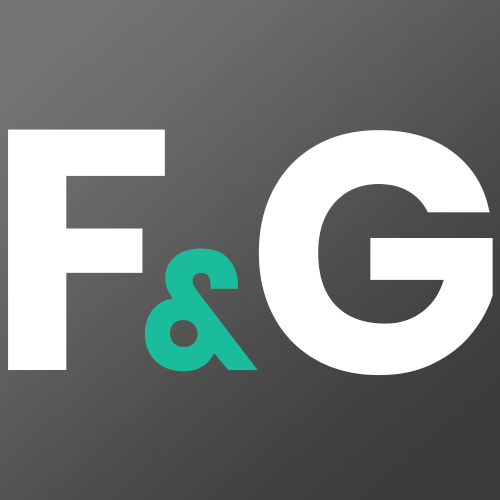
<style>
.page{position:relative;width:500px;height:500px;background:#ffffff}
.page>*{position:absolute;margin:0}
.t1{font:340px "Poppins-Bold";color:#ffffff}
.t2{font:170px "Poppins-Bold";color:#1abc9c}
</style>
<div class="page">
<p class="t1" style="left:8px;top:129px;width:157px;height:241px">F</p>
<p class="t1" style="left:258px;top:130px;width:235px;height:246px">G</p>
<p class="t2" style="left:144px;top:248px;width:114px;height:124px">&amp;</p>
</div>
